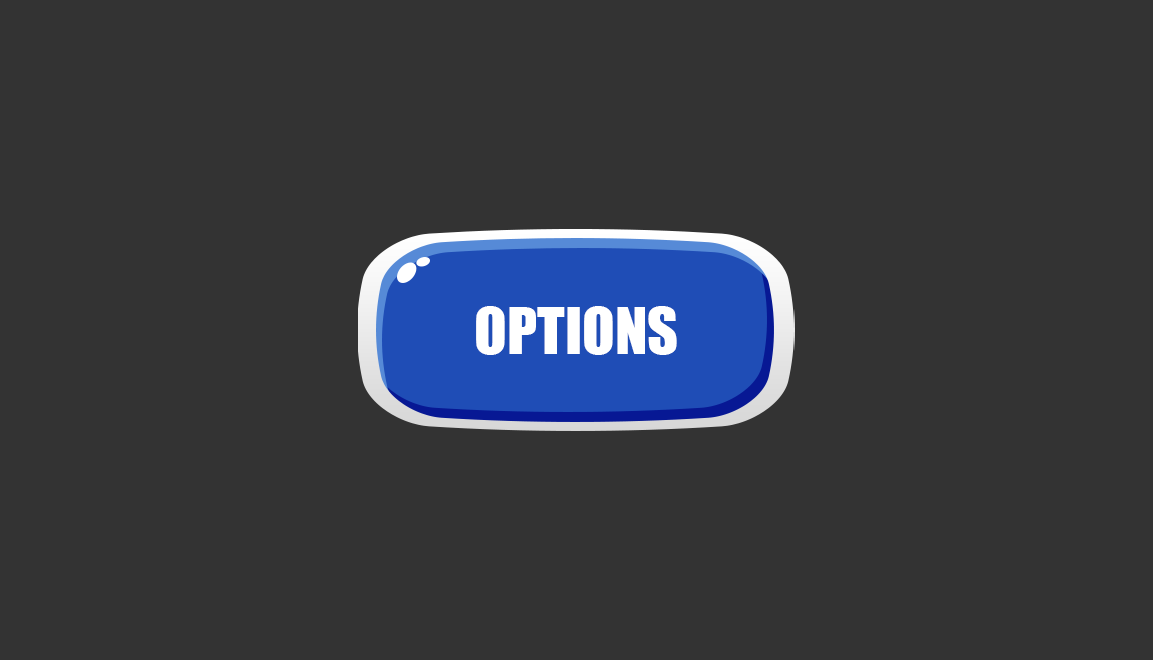
<style>
.page{position:relative;width:1153px;height:660px;background:#333333}
.page>*{position:absolute;margin:0}
.t1{font:60px "Impact";color:#ffffff}
</style>
<div class="page">
<p class="t1" style="left:476px;top:306px;width:201px;height:49px">OPTIONS</p>
</div>
